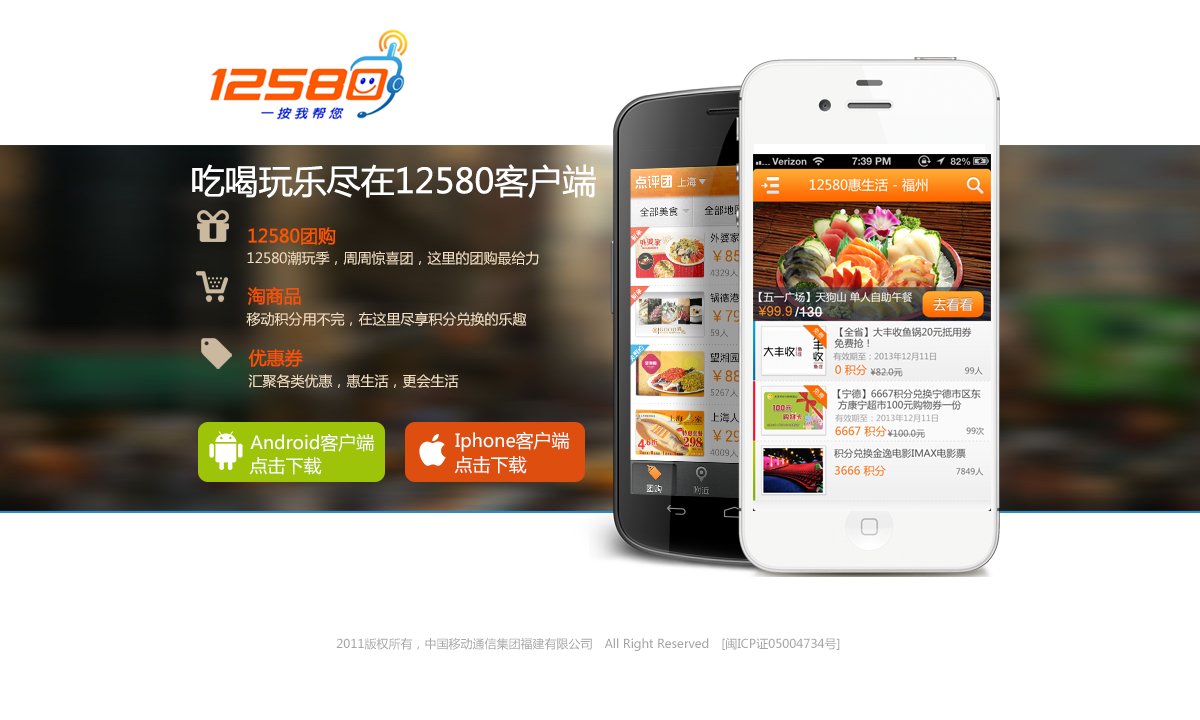
<style>
.page{position:relative;width:1200px;height:720px;background:#ffffff}
.page>*{position:absolute;margin:0}
.t1{font:34px "MicrosoftYaHei";color:#ffffff}
.t2{font:18px "MicrosoftYaHei";color:#ff5400}
.t3{font:14px "MicrosoftYaHei";color:#f3dfc1}
.t4{font:18px "MicrosoftYaHei";color:#ff4f00}
.t5{font:14px "MicrosoftYaHei";color:#f4e0c2}
.t6{font:18px "MicrosoftYaHei";color:#ffffff}
.t7{font:12px "MicrosoftYaHei";color:#a5a5a5}
</style>
<div class="page">
<p class="t1" style="left:192px;top:164px;width:404px;height:34px">吃喝玩乐尽在12580客户端</p>
<p class="t2" style="left:248px;top:227px;width:88px;height:18px">12580团购</p>
<p class="t3" style="left:247px;top:251px;width:292px;height:14px">12580潮玩季，周周惊喜团，这里的团购最给力</p>
<p class="t4" style="left:247px;top:287px;width:54px;height:18px">淘商品</p>
<p class="t5" style="left:246px;top:312px;width:281px;height:14px">移动积分用不完，在这里尽享积分兑换的乐趣</p>
<p class="t4" style="left:248px;top:349px;width:55px;height:18px">优惠券</p>
<p class="t5" style="left:248px;top:374px;width:211px;height:14px">汇聚各类优惠，惠生活，更会生活</p>
<p class="t6" style="left:250px;top:433px;width:124px;height:19px">Android客户端</p>
<p class="t6" style="left:455px;top:431px;width:115px;height:21px">Iphone客户端</p>
<p class="t6" style="left:249px;top:457px;width:73px;height:18px">点击下载</p>
<p class="t6" style="left:454px;top:456px;width:73px;height:18px">点击下载</p>
<p class="t7" style="left:336px;top:637px;width:504px;height:14px">2011版权所有，中国移动通信集团福建有限公司　All Right Reserved　[闽ICP证05004734号]</p>
</div>
